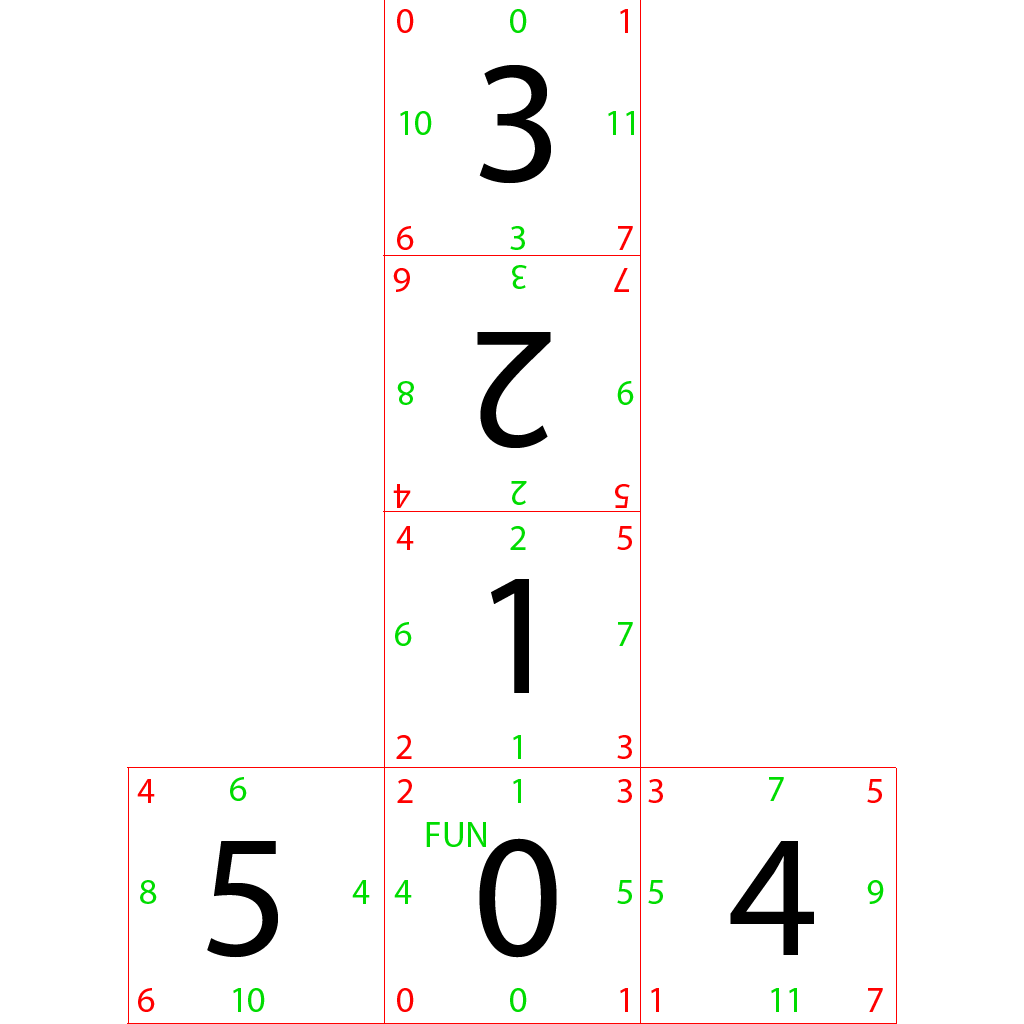
<style>
.page{position:relative;width:1024px;height:1024px;background:#ffffff}
.page>*{position:absolute;margin:0}
.t1{font:36px "MyriadPro-Regular";color:#ff0000}
.t2{font:36px "MyriadPro-Regular";color:#00dc00}
.t3{font:175px "MyriadPro-Regular";color:#000000}
</style>
<div class="page">
<p class="t1" style="left:397px;top:9px;width:17px;height:24px">0</p>
<p class="t2" style="left:510px;top:9px;width:17px;height:24px">0</p>
<p class="t1" style="left:620px;top:9px;width:8px;height:24px">1</p>
<p class="t3" style="left:479px;top:65px;width:72px;height:119px">3</p>
<p class="t2" style="left:400px;top:111px;width:32px;height:24px">10</p>
<p class="t2" style="left:608px;top:111px;width:26px;height:24px">11</p>
<p class="t1" style="left:397px;top:226px;width:17px;height:24px">6</p>
<p class="t2" style="left:510px;top:226px;width:15px;height:24px">3</p>
<p class="t1" style="left:618px;top:226px;width:15px;height:24px">7</p>
<p class="t1" style="left:393px;top:268px;width:17px;height:24px;rotate:-180deg">6</p>
<p class="t2" style="left:512px;top:265px;width:15px;height:24px;rotate:-180deg">3</p>
<p class="t1" style="left:614px;top:268px;width:15px;height:24px;rotate:-180deg">7</p>
<p class="t3" style="left:477px;top:332px;width:74px;height:116px;rotate:-180deg">2</p>
<p class="t2" style="left:397px;top:381px;width:17px;height:24px;rotate:-180deg">8</p>
<p class="t2" style="left:617px;top:381px;width:17px;height:24px;rotate:-180deg">9</p>
<p class="t1" style="left:393px;top:484px;width:18px;height:24px;rotate:-180deg">4</p>
<p class="t2" style="left:511px;top:481px;width:16px;height:24px;rotate:-180deg">2</p>
<p class="t1" style="left:615px;top:484px;width:15px;height:24px;rotate:-180deg">5</p>
<p class="t1" style="left:396px;top:526px;width:18px;height:24px">4</p>
<p class="t2" style="left:510px;top:526px;width:16px;height:24px">2</p>
<p class="t1" style="left:617px;top:526px;width:15px;height:24px">5</p>
<p class="t3" style="left:491px;top:579px;width:38px;height:114px">1</p>
<p class="t2" style="left:395px;top:622px;width:17px;height:24px">6</p>
<p class="t2" style="left:618px;top:622px;width:15px;height:24px">7</p>
<p class="t1" style="left:396px;top:735px;width:16px;height:24px">2</p>
<p class="t2" style="left:513px;top:735px;width:8px;height:24px">1</p>
<p class="t1" style="left:617px;top:735px;width:15px;height:24px">3</p>
<p class="t1" style="left:137px;top:779px;width:18px;height:24px">4</p>
<p class="t2" style="left:230px;top:777px;width:17px;height:24px">6</p>
<p class="t1" style="left:397px;top:779px;width:16px;height:24px">2</p>
<p class="t2" style="left:513px;top:779px;width:8px;height:24px">1</p>
<p class="t1" style="left:617px;top:779px;width:15px;height:24px">3</p>
<p class="t1" style="left:648px;top:779px;width:15px;height:24px">3</p>
<p class="t2" style="left:769px;top:777px;width:15px;height:24px">7</p>
<p class="t1" style="left:867px;top:779px;width:15px;height:24px">5</p>
<p class="t2" style="left:426px;top:822px;width:60px;height:25px">FUN</p>
<p class="t3" style="left:207px;top:841px;width:71px;height:117px">5</p>
<p class="t3" style="left:479px;top:838px;width:78px;height:120px">0</p>
<p class="t3" style="left:730px;top:841px;width:84px;height:114px">4</p>
<p class="t2" style="left:140px;top:880px;width:17px;height:24px">8</p>
<p class="t2" style="left:352px;top:880px;width:18px;height:24px">4</p>
<p class="t2" style="left:394px;top:880px;width:18px;height:24px">4</p>
<p class="t2" style="left:617px;top:880px;width:15px;height:24px">5</p>
<p class="t2" style="left:648px;top:880px;width:15px;height:24px">5</p>
<p class="t2" style="left:867px;top:880px;width:17px;height:24px">9</p>
<p class="t1" style="left:138px;top:988px;width:17px;height:24px">6</p>
<p class="t2" style="left:233px;top:988px;width:32px;height:24px">10</p>
<p class="t1" style="left:397px;top:988px;width:17px;height:24px">0</p>
<p class="t2" style="left:510px;top:988px;width:17px;height:24px">0</p>
<p class="t1" style="left:620px;top:988px;width:8px;height:24px">1</p>
<p class="t1" style="left:651px;top:988px;width:8px;height:24px">1</p>
<p class="t2" style="left:771px;top:988px;width:26px;height:24px">11</p>
<p class="t1" style="left:868px;top:988px;width:15px;height:24px">7</p>
</div>
